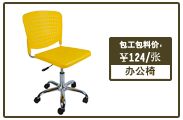
<style>
.page{position:relative;width:183px;height:120px;background:#ffffff}
.page>*{position:absolute;margin:0}
.t1{font:7.9px "HeitiCSEG";color:#fffefe}
.t2{font:10.6px "HeitiCSEG";color:#ffffff}
.t3{font:10.6px "SimSun";color:#ffffff}
.t4{font:10.1px "HeitiCSEG"}
.t5{font:10.1px "HeitiCSEG";color:#4b4221}
</style>
<div class="page">
<p class="t1" style="left:119px;top:40px;width:43px;height:9px">包工包料价：</p>
<p class="t1" style="left:119px;top:40px;width:43px;height:9px">包工包料价：</p>
<p class="t2" style="left:119px;top:52px;width:42px;height:11px">￥124/<span class="t3">张</span></p>
<p class="t4" style="left:125px;top:66px;width:30px;height:10px">课桌椅</p>
<p class="t5" style="left:125px;top:66px;width:30px;height:10px">办公椅</p>
</div>
